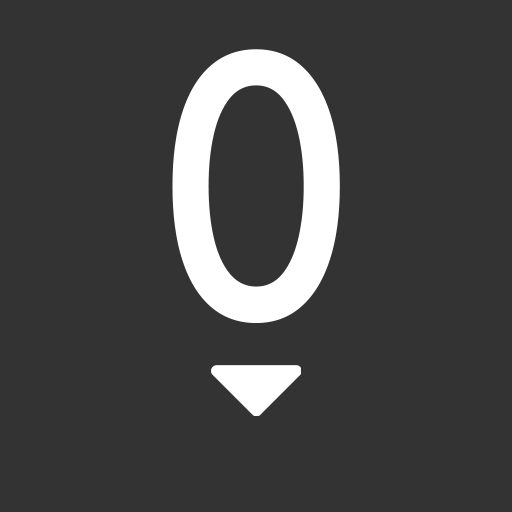
<style>
.page{position:relative;width:512px;height:512px;background:#333333}
.page>*{position:absolute;margin:0}
.t1{font:350px "Comfortaa-Bold";color:#ffffff}
</style>
<div class="page">
<p class="t1" style="left:172px;top:49px;width:168px;height:274px">0</p>
</div>
